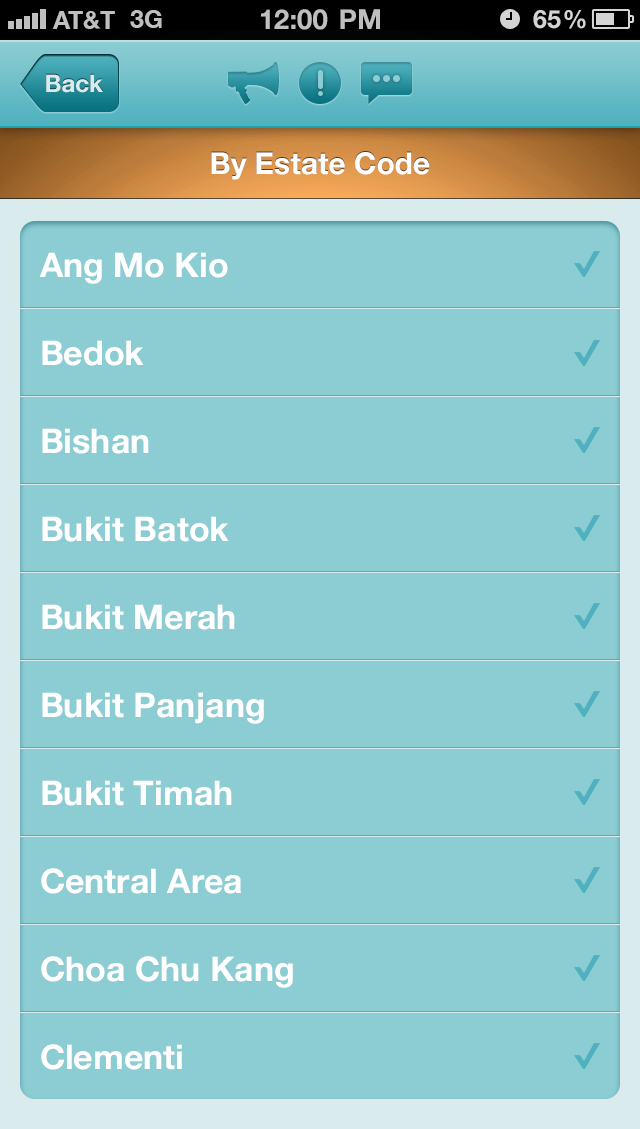
<style>
.page{position:relative;width:640px;height:1129px;background:#8cccd3}
.page>*{position:absolute;margin:0}
.t1{font:24px "HelveticaNeueLTCom-Bd";color:#d9ebed}
.t2{font:30px "HelveticaNeueLTCom-Bd";color:#ffffff}
.t3{font:34px/88px "HelveticaNeueLTCom-Bd";color:#ffffff}
</style>
<div class="page">
<p class="t1" style="left:46px;top:74px;width:57px;height:19px">Back</p>
<p class="t2" style="left:211px;top:152px;width:219px;height:28px">By Estate Code</p>
<p class="t3" style="left:39px;top:252px;width:254px;height:818px">Ang Mo Kio<br>Bedok<br>Bishan<br>Bukit Batok<br>Bukit Merah<br>Bukit Panjang<br>Bukit Timah<br>Central Area<br>Choa Chu Kang<br>Clementi</p>
</div>
